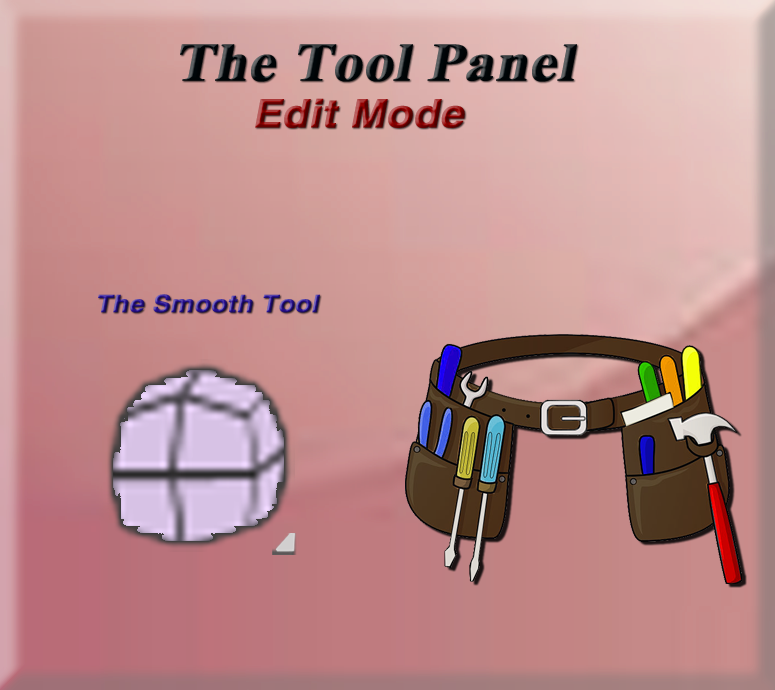
<style>
.page{position:relative;width:775px;height:690px}
.page>*{position:absolute;margin:0}
.t1{font:53.9px "TimesNewRomanPS-BoldMT";color:#000609;font-weight:bold;font-style:italic;scale:1.08 1}
.t2{font:39.1px "HelveticaLTStd-Bold";font-weight:bold;font-style:italic;scale:1.08 1}
.t3{font:53.9px "TimesNewRomanPS-BoldMT";font-weight:bold;font-style:italic;scale:1.08 1}
.t4{font:24.2px "HelveticaLTStd-Bold";font-weight:bold;font-style:italic;scale:1.08 1}
</style>
<div class="page">
<p class="t1" style="left:180px;top:44px;width:397px;height:38px">The Tool Panel</p>
<p class="t2" style="left:255px;top:98px;width:210px;height:30px"><span class="t3"> </span>Edit Mode</p>
<p class="t4" style="left:98px;top:294px;width:222px;height:19px">The Smooth Tool</p>
</div>
